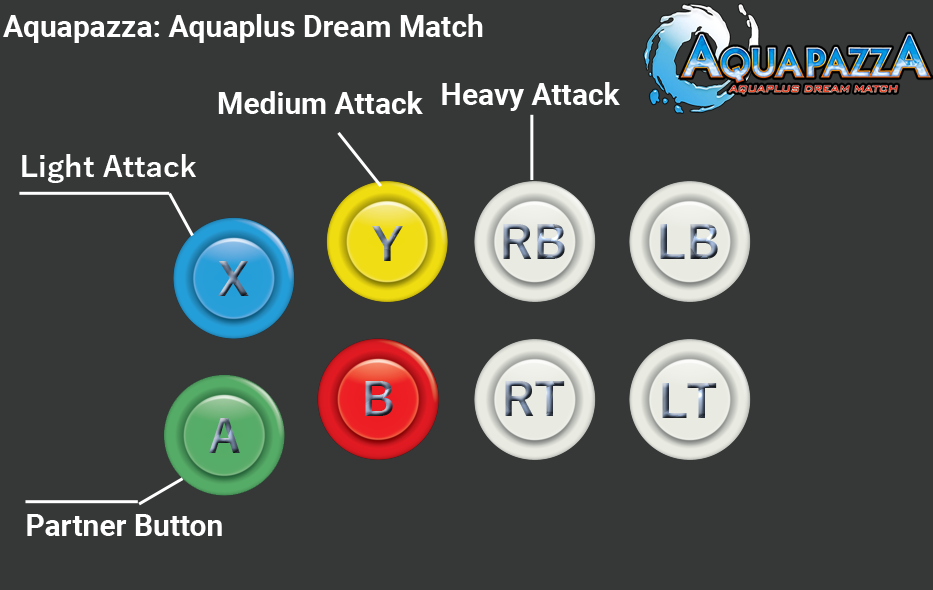
<style>
.page{position:relative;width:933px;height:590px;background:#363838}
.page>*{position:absolute;margin:0}
.t1{font:30px "Roboto-Bold";color:#ffffff}
.t2{font:30px "YuGothic-Bold";color:#ffffff}
</style>
<div class="page">
<p class="t1" style="left:3px;top:14px;width:480px;height:29px">Aquapazza: Aquaplus Dream Match</p>
<p class="t1" style="left:442px;top:82px;width:178px;height:29px">Heavy Attack</p>
<p class="t1" style="left:218px;top:91px;width:205px;height:23px">Medium Attack</p>
<p class="t2" style="left:22px;top:154px;width:174px;height:29px">Light Attack</p>
<p class="t1" style="left:27px;top:514px;width:195px;height:22px">Partner Button</p>
</div>
